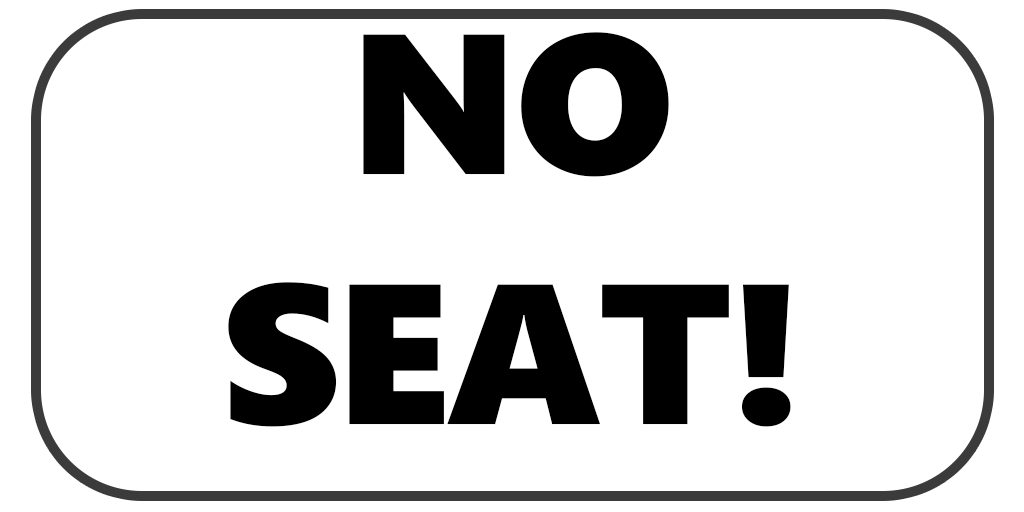
<style>
.page{position:relative;width:1024px;height:512px;background:#ffffff}
.page>*{position:absolute;margin:0}
.t1{font:198.5px "SegoeUIBlack";letter-spacing:-0.02em;color:#000000;scale:1.05 1}
</style>
<div class="page">
<p class="t1" style="left:228px;top:32px;width:563px;height:395px;text-align:center">NO SEAT!</p>
</div>
